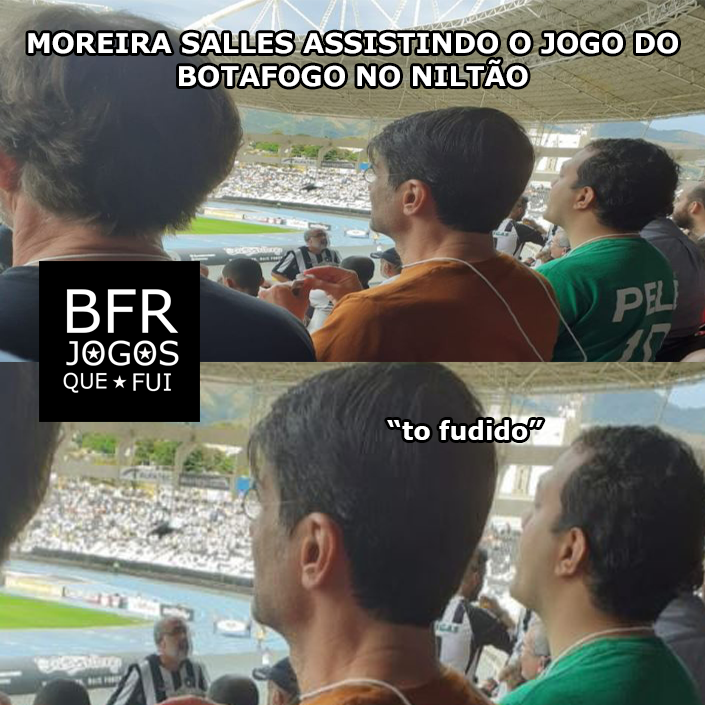
<style>
.page{position:relative;width:705px;height:705px}
.page>*{position:absolute;margin:0}
.t1{font:27.1px "Verdana-Bold";color:#ffffff}
.t2{font:25px "Verdana-Bold";color:#ffffff}
</style>
<div class="page">
<p class="t1" style="left:28px;top:32px;width:650px;height:55px;text-align:center">MOREIRA SALLES ASSISTINDO O JOGO DO BOTAFOGO NO NILTÃO</p>
<p class="t2" style="left:387px;top:420px;width:156px;height:20px">“to fudido”</p>
</div>
